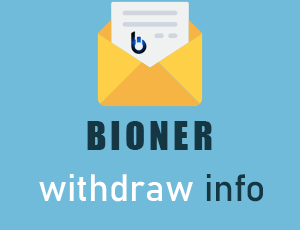
<style>
.page{position:relative;width:300px;height:230px;background:#70bbd9}
.page>*{position:absolute;margin:0}
.t1{font:37.4px "Impact";letter-spacing:0.1em;color:#153643}
.t2{font:37.4px "Bahnschrift";color:#ffffff}
.t3{font:37.4px "Bahnschrift";color:#153643}
</style>
<div class="page">
<p class="t1" style="left:87px;top:121px;width:125px;height:29px">BIONER</p>
<p class="t2" style="left:39px;top:174px;width:224px;height:28px">withdraw <span class="t3">info</span></p>
</div>
